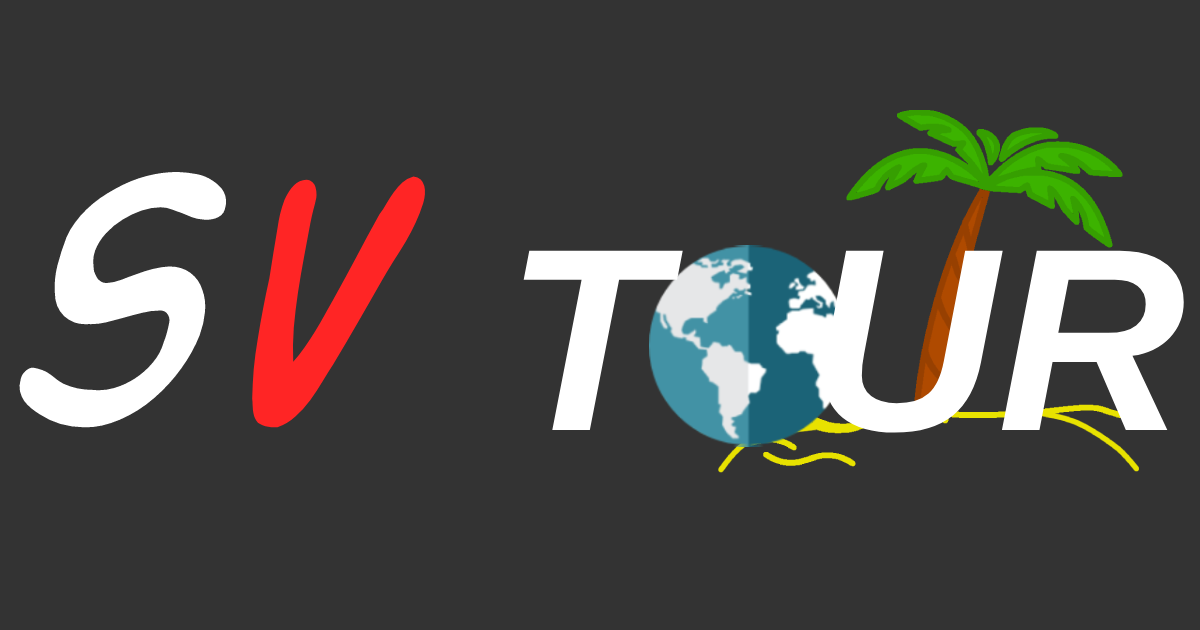
<style>
.page{position:relative;width:1200px;height:630px;background:#333333}
.page>*{position:absolute;margin:0}
.t1{font:260.6px "Arimo-BoldItalic";color:#ffffff}
.t2{font:390.8px "ActionMan-Italic";color:#ffffff}
.t3{font:390.8px "ActionMan-Italic";color:#ff2525}
</style>
<div class="page">
<p class="t1" style="left:19px;top:172px;width:1165px;height:261px"><span class="t2">s</span><span class="t3">v </span>T  UR</p>
</div>
